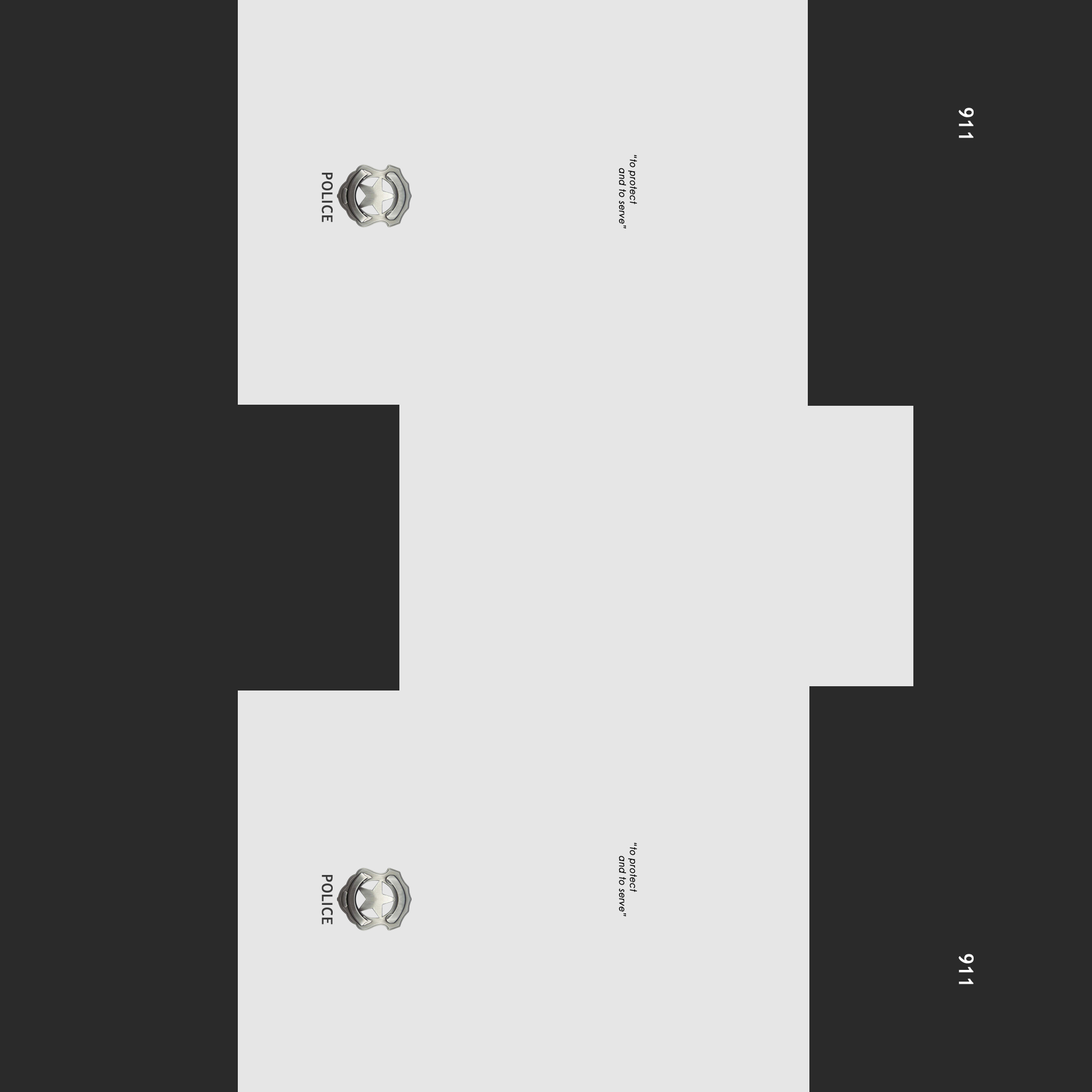
<style>
.page{position:relative;width:1092px;height:1092px;background:#e6e6e6}
.page>*{position:absolute;margin:0}
.t1{font:19.7px "TrebuchetMS";letter-spacing:0.04em;color:#ffffff;font-weight:bold}
.t2{font:9.1px "CenturyGothic";letter-spacing:0.04em;color:#000000;font-weight:bold;font-style:italic;scale:0.9 1}
.t3{font:14.4px "TrebuchetMS";letter-spacing:0.04em;color:#393939;font-weight:bold}
</style>
<div class="page">
<p class="t1" style="left:959px;top:108px;width:15px;height:30px;rotate:90deg">911</p>
<p class="t2" style="left:619px;top:155px;width:18px;height:74px;rotate:90deg">“to protect<br>      and to serve”</p>
<p class="t3" style="left:322px;top:173px;width:11px;height:49px;rotate:90deg">POLICE</p>
<p class="t2" style="left:619px;top:842px;width:18px;height:75px;rotate:90deg">“to protect<br>      and to serve”</p>
<p class="t3" style="left:322px;top:875px;width:11px;height:50px;rotate:90deg">POLICE</p>
<p class="t1" style="left:959px;top:954px;width:15px;height:30px;rotate:90deg">911</p>
</div>
